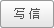
<style>
.page{position:relative;width:54px;height:28px}
.page>*{position:absolute;margin:0}
.t1{font:12px "SimSun";letter-spacing:0.26em;color:#555555}
</style>
<div class="page">
<p class="t1" style="left:14px;top:8px;width:26px;height:11px">写信</p>
</div>
